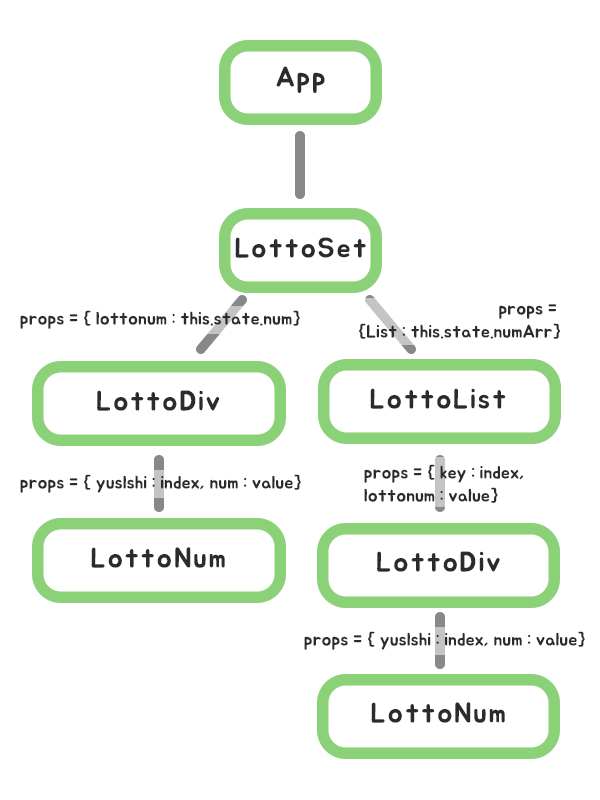
<style>
.page{position:relative;width:600px;height:800px;background:#ffffff}
.page>*{position:absolute;margin:0}
.t1{font:28px "BMJUA";letter-spacing:0.06em;color:#2b2b2b}
.t2{font:18px/23px "BMJUA";color:#2b2b2b}
.t3{font:18px "BMJUA";color:#2b2b2b}
</style>
<div class="page">
<p class="t1" style="left:276px;top:66px;width:49px;height:27px">App</p>
<p class="t1" style="left:235px;top:237px;width:131px;height:21px">LottoSet</p>
<p class="t2" style="left:359px;top:304px;width:201px;height:35px;text-align:right">props = <br>{List : this.state.numArr}</p>
<p class="t3" style="left:20px;top:310px;width:280px;height:19px">props = { lottonum : this.state.num}</p>
<p class="t1" style="left:97px;top:390px;width:123px;height:21px">LottoDiv</p>
<p class="t1" style="left:370px;top:388px;width:136px;height:21px">LottoList</p>
<p class="t2" style="left:364px;top:464px;width:159px;height:39px">props = { key : index, <br>lottonum : value}</p>
<p class="t3" style="left:20px;top:474px;width:281px;height:19px">props = { yuslshi : index, num : value}</p>
<p class="t1" style="left:91px;top:547px;width:134px;height:21px">LottoNum</p>
<p class="t1" style="left:377px;top:551px;width:123px;height:21px">LottoDiv</p>
<p class="t3" style="left:304px;top:631px;width:281px;height:19px">props = { yuslshi : index, num : value}</p>
<p class="t1" style="left:371px;top:702px;width:134px;height:21px">LottoNum</p>
</div>
